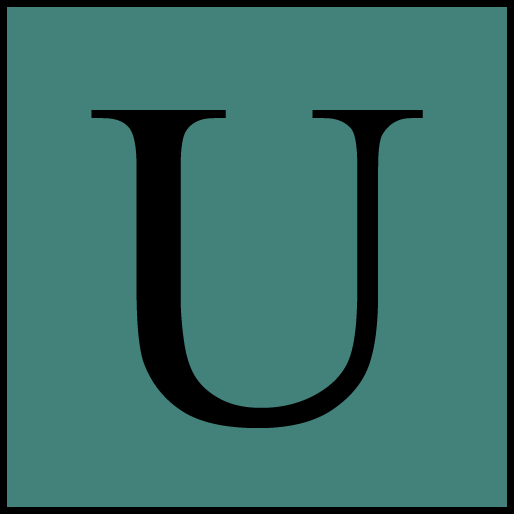
<style>
.page{position:relative;width:514px;height:514px;background:#42827b}
.page>*{position:absolute;margin:0}
.t1{font:469px "TimesNewRomanPSMT";color:#000000}
</style>
<div class="page">
<p class="t1" style="left:91px;top:110px;width:332px;height:318px">U</p>
</div>
